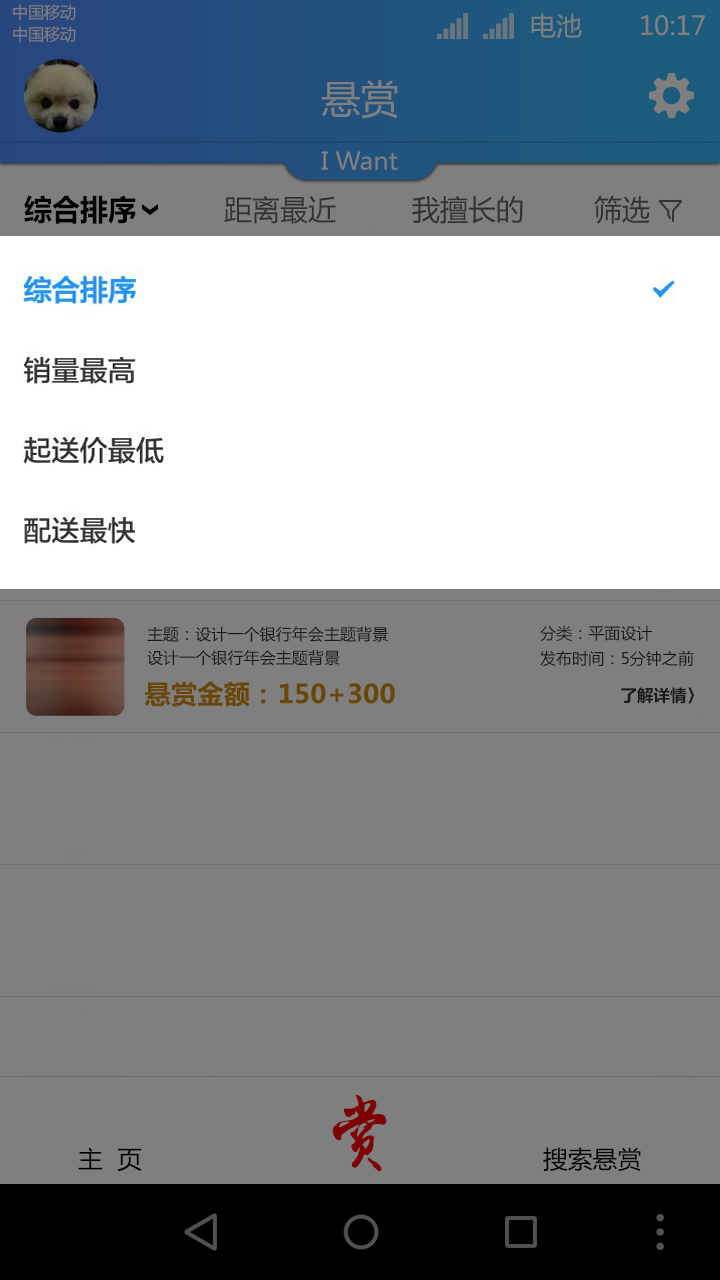
<style>
.page{position:relative;width:720px;height:1280px;background:#7f7f7f}
.page>*{position:absolute;margin:0}
.t1{font:16.2px "MicrosoftYaHei";color:#7f7f7f;text-transform:uppercase}
.t2{font:26.1px "MicrosoftYaHei";color:#7f7f7f;text-transform:uppercase}
.t3{font:39.5px "MicrosoftYaHei";color:#7f7f7f;text-transform:uppercase}
.t4{font:24.3px "MicrosoftYaHei";color:#7f7f7f}
.t5{font:28.8px "MicrosoftYaHei-Bold";color:#000000}
.t6{font:28.8px "MicrosoftYaHei";color:#323232}
.t7{font:15.8px/23.6px "MicrosoftYaHei";color:#191919}
.t8{font:15.8px "MicrosoftYaHei";color:#191919}
.t9{font:26px "MicrosoftYaHei-Bold";color:#694700}
.t10{font:16.4px "MicrosoftYaHei-Bold";color:#191919}
.t11{font:79.6px "lixukexingshu";letter-spacing:0.04em;color:#7f0000}
.t12{font:24.3px "MicrosoftYaHei";color:#000000}
</style>
<div class="page">
<p class="t1" style="left:13px;top:4px;width:63px;height:17px">中国移动</p>
<p class="t2" style="left:531px;top:13px;width:51px;height:25px">电池</p>
<p class="t2" style="left:641px;top:15px;width:64px;height:21px">10:17</p>
<p class="t1" style="left:13px;top:26px;width:63px;height:17px">中国移动</p>
<p class="t3" style="left:321px;top:80px;width:77px;height:39px">悬赏</p>
<p class="t4" style="left:321px;top:151px;width:77px;height:19px">I Want</p>
<p class="t5" style="left:24px;top:195px;width:112px;height:29px">综合排序</p>
<p class="t6" style="left:224px;top:195px;width:112px;height:29px">距离最近</p>
<p class="t6" style="left:412px;top:195px;width:111px;height:29px">我擅长的</p>
<p class="t6" style="left:594px;top:195px;width:56px;height:29px">筛选</p>
<p class="t7" style="left:147px;top:626px;width:241px;height:40px">主题：设计一个银行年会主题背景<br>设计一个银行年会主题背景</p>
<p class="t8" style="left:540px;top:625px;width:113px;height:16px">分类：平面设计</p>
<p class="t8" style="left:540px;top:650px;width:154px;height:17px">发布时间：5分钟之前</p>
<p class="t9" style="left:145px;top:681px;width:121px;height:26px">悬赏金额：</p>
<p class="t9" style="left:280px;top:683px;width:115px;height:21px">150+300</p>
<p class="t10" style="left:621px;top:687px;width:73px;height:17px">了解详情〉</p>
<p class="t11" style="left:332px;top:1095px;width:55px;height:77px">赏</p>
<p class="t12" style="left:78px;top:1147px;width:64px;height:25px">主  页</p>
<p class="t12" style="left:543px;top:1147px;width:98px;height:24px">搜索悬赏</p>
</div>
